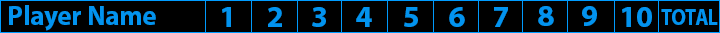
<style>
.page{position:relative;width:720px;height:33px;background:#000000}
.page>*{position:absolute;margin:0}
.t1{font:27.3px "MyriadPro-Bold";color:#0293ef}
.t2{font:30.7px "MyriadPro-Bold";color:#0293ef}
.t3{font:23.3px "MyriadPro-Bold";color:#0293ef;scale:0.86 1}
</style>
<div class="page">
<p class="t1" style="left:9px;top:5px;width:147px;height:26px">Player Name</p>
<p class="t2" style="left:538px;top:6px;width:16px;height:20px">8</p>
<p class="t2" style="left:582px;top:6px;width:15px;height:20px">9</p>
<p class="t2" style="left:222px;top:7px;width:9px;height:20px">1</p>
<p class="t2" style="left:268px;top:7px;width:14px;height:20px">2</p>
<p class="t2" style="left:312px;top:7px;width:14px;height:20px">3</p>
<p class="t2" style="left:356px;top:7px;width:16px;height:20px">4</p>
<p class="t2" style="left:404px;top:7px;width:14px;height:20px">5</p>
<p class="t2" style="left:449px;top:7px;width:16px;height:20px">6</p>
<p class="t2" style="left:494px;top:7px;width:14px;height:20px">7</p>
<p class="t2" style="left:622px;top:7px;width:30px;height:20px">10</p>
<p class="t3" style="left:661px;top:9px;width:57px;height:16px">TOTAL</p>
</div>
